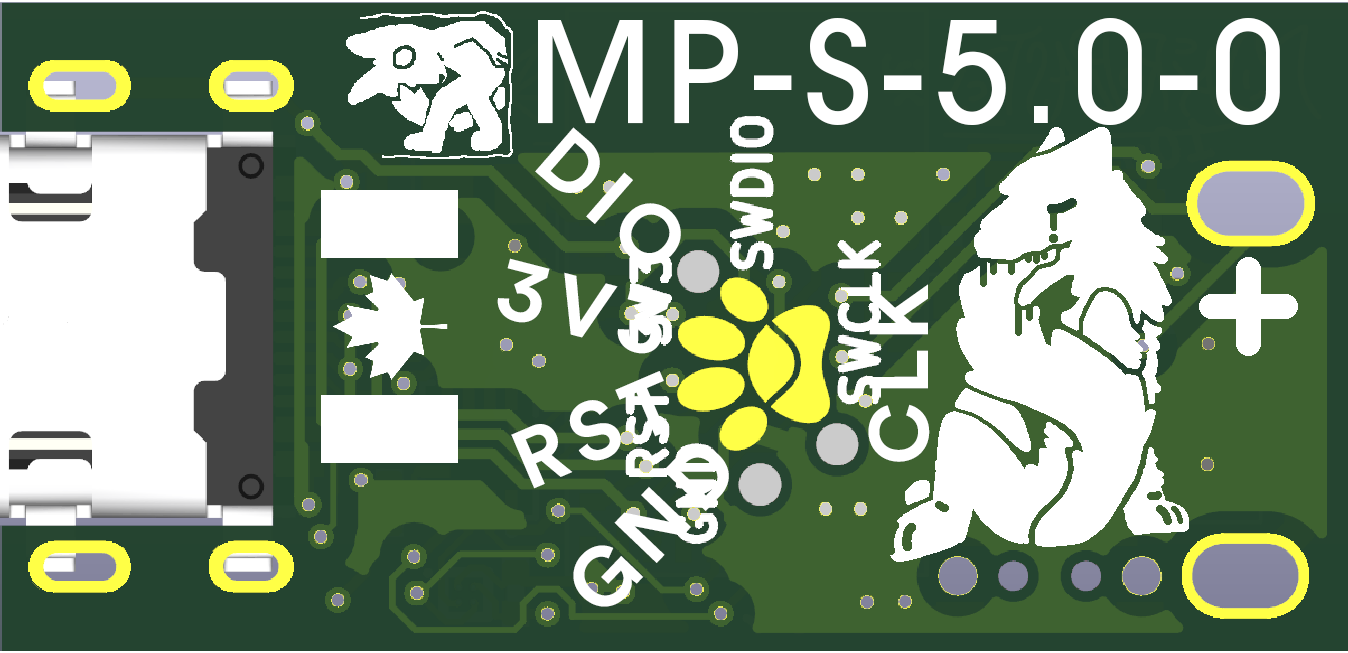
<style>
.page{position:relative;width:1348px;height:653px;background:#ffffff}
.page>*{position:absolute;margin:0}
.t1{font:139.5px "AvantGarde-Medium";letter-spacing:0.1em;color:#ffffff;scale:0.96 1}
.t2{font:82.2px "CircularSpotifyText-Bold";letter-spacing:0.1em;color:#ffffff}
</style>
<div class="page">
<p class="t1" style="left:538px;top:18px;width:742px;height:107px">MP-S-5.0-0</p>
<p class="t2" style="left:535px;top:127px;width:146px;height:138px;rotate:41deg">DIO</p>
<p class="t2" style="left:497px;top:258px;width:173px;height:96px;rotate:14deg">3V3</p>
<p class="t2" style="left:868px;top:284px;width:62px;height:178px;rotate:-90deg">CLK</p>
<p class="t2" style="left:511px;top:371px;width:155px;height:118px;rotate:-23deg">RST</p>
<p class="t2" style="left:573px;top:446px;width:156px;height:161px;rotate:-46deg">GND</p>
</div>
